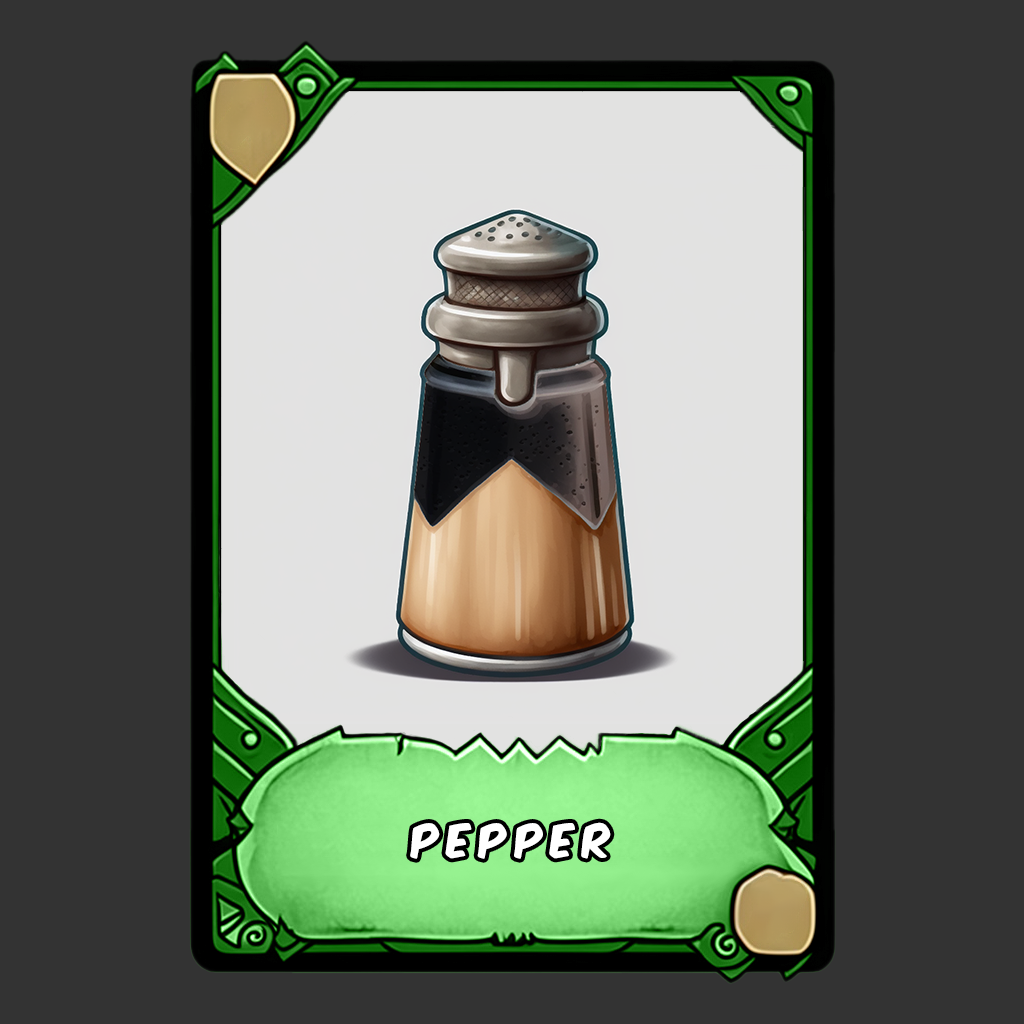
<style>
.page{position:relative;width:1024px;height:1024px;background:#333333}
.page>*{position:absolute;margin:0}
.t1{font:40px "KomikaAxis";letter-spacing:0.2em;color:#ffffff}
</style>
<div class="page">
<p class="t1" style="left:410px;top:822px;width:201px;height:37px">pepper</p>
</div>
